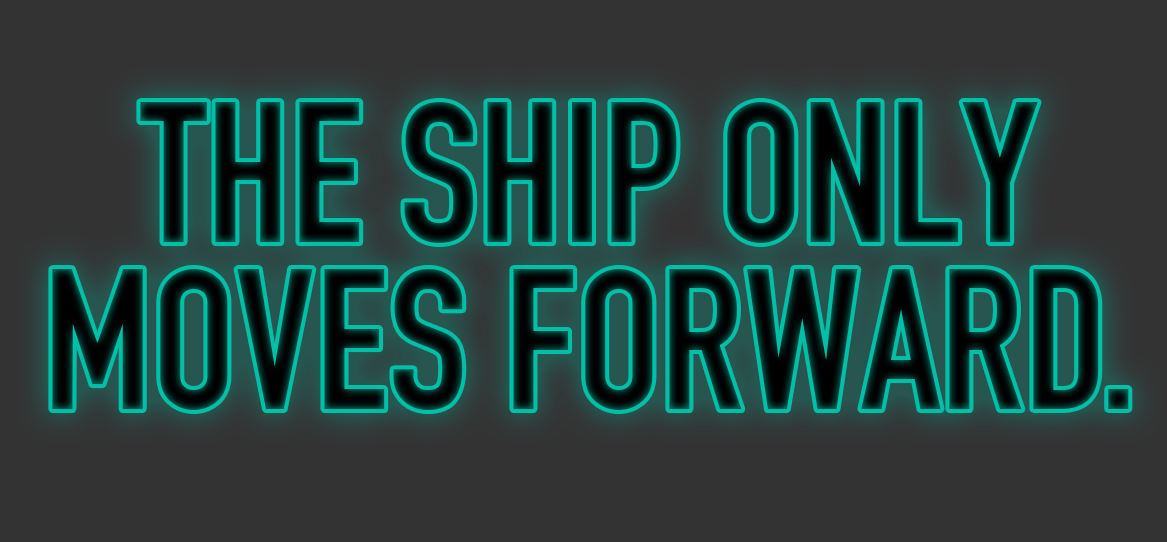
<style>
.page{position:relative;width:1167px;height:542px;background:#333333}
.page>*{position:absolute;margin:0}
.t1{font:196.6px "DINEngschrift";color:#001412;text-transform:uppercase}
</style>
<div class="page">
<p class="t1" style="left:52px;top:102px;width:1077px;height:308px">the ship only moves forward.</p>
</div>
